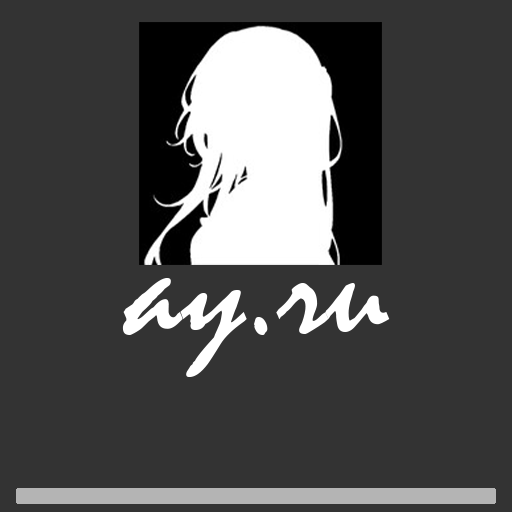
<style>
.page{position:relative;width:512px;height:512px;background:#333333}
.page>*{position:absolute;margin:0}
.t1{font:150px "Mistral";color:#ffffff}
</style>
<div class="page">
<p class="t1" style="left:122px;top:278px;width:268px;height:99px">ay.ru</p>
</div>
